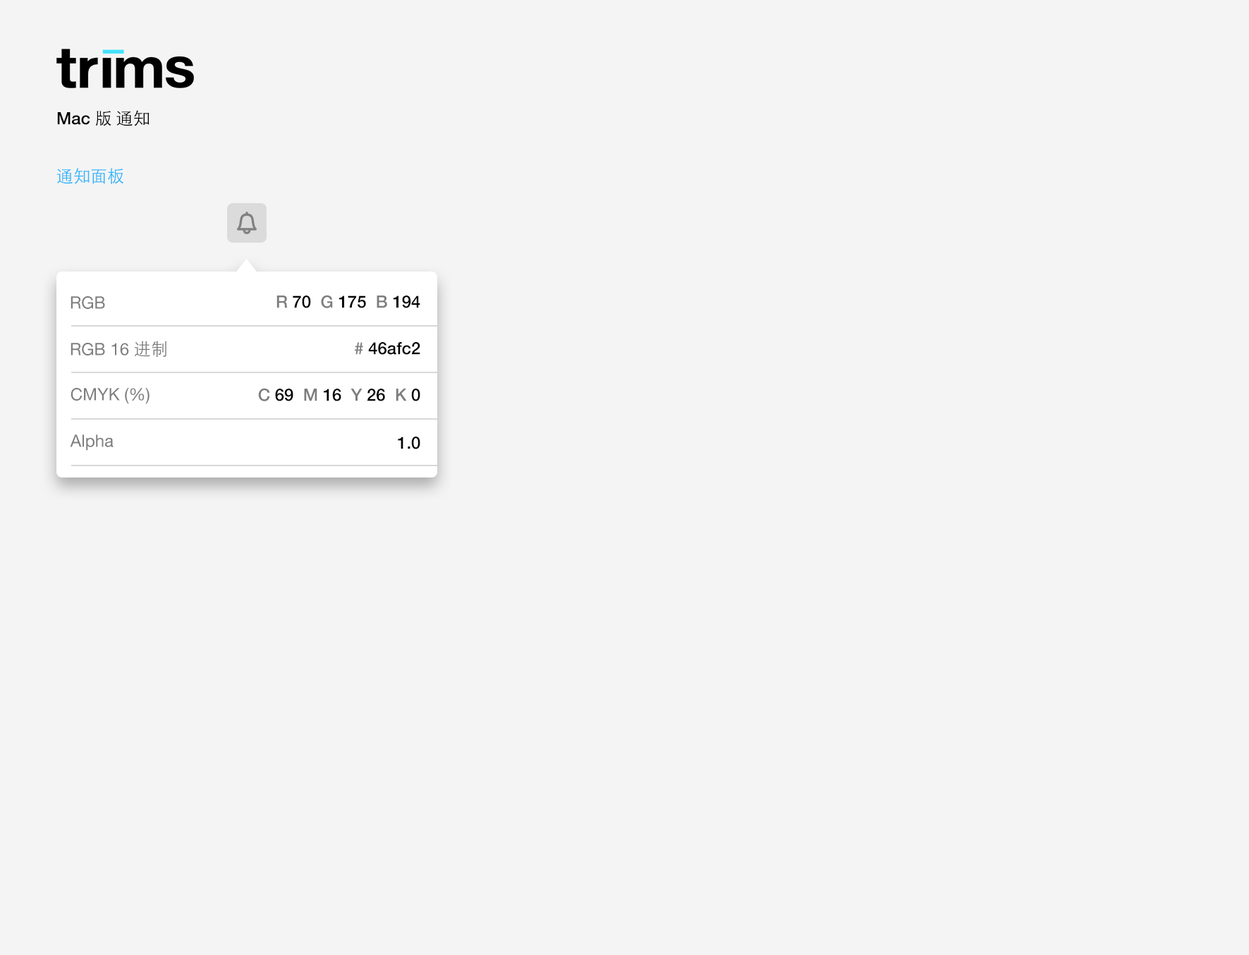
<style>
.page{position:relative;width:1249px;height:955px;background:#f4f4f4}
.page>*{position:absolute;margin:0}
.t1{font:16.9px/28.9px "STHeitiSC-Light";color:#000000}
.t2{font:16.9px/28.9px "HelveticaNeue-Medium";color:#000000}
.t3{font:16.9px/28.9px "STHeitiSC-Light";color:#27b3fc}
.t4{font:16.9px "HelveticaNeue";color:#7d7d7d}
.t5{font:16.9px "HelveticaNeue-Medium";color:#000000}
.t6{font:16.9px "HelveticaNeue-Medium";color:#7d7d7d}
.t7{font:16.9px "STHeitiSC-Light";color:#7d7d7d}
</style>
<div class="page">
<p class="t1" style="left:56px;top:110px;width:93px;height:74px"><span class="t2">Mac </span>版 通知<br><br><span class="t3">通知面板</span></p>
<p class="t4" style="left:71px;top:296px;width:34px;height:13px">RGB</p>
<p class="t5" style="left:276px;top:295px;width:144px;height:13px"><span class="t6">R </span>70  <span class="t6">G </span>175  <span class="t6">B </span>194</p>
<p class="t4" style="left:71px;top:341px;width:96px;height:16px">RGB 16 <span class="t7">进制</span></p>
<p class="t5" style="left:355px;top:342px;width:65px;height:13px"><span class="t6"># </span>46afc2</p>
<p class="t4" style="left:71px;top:388px;width:78px;height:16px">CMYK (%)</p>
<p class="t5" style="left:258px;top:388px;width:162px;height:13px"><span class="t6">C </span>69  <span class="t6">M </span>16  <span class="t6">Y </span>26  <span class="t6">K </span>0</p>
<p class="t4" style="left:70px;top:434px;width:44px;height:17px">Alpha</p>
<p class="t5" style="left:398px;top:437px;width:22px;height:12px">1.0</p>
</div>
